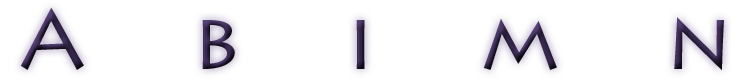
<style>
.page{position:relative;width:753px;height:80px;background:#ffffff}
.page>*{position:absolute;margin:0}
.t1{font:83px "LithosPro-Regular";letter-spacing:1.28em;color:#34264a}
</style>
<div class="page">
<p class="t1" style="left:20px;top:7px;width:704px;height:63px">Abimn</p>
</div>
